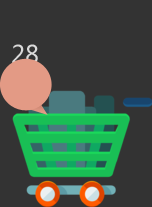
<style>
.page{position:relative;width:152px;height:207px;background:#333333}
.page>*{position:absolute;margin:0}
.t1{font:24px "MicrosoftYaHei";color:#dadada;text-transform:uppercase}
</style>
<div class="page">
<p class="t1" style="left:12px;top:44px;width:26px;height:20px">28</p>
</div>
